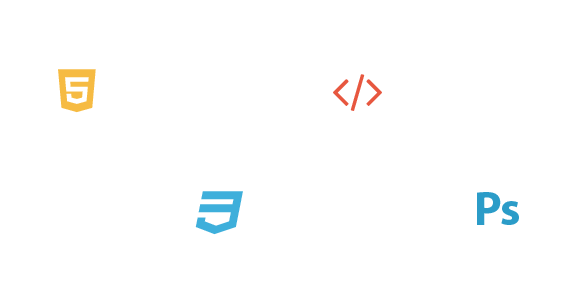
<style>
.page{position:relative;width:575px;height:300px;background:#ffffff}
.page>*{position:absolute;margin:0}
.t1{font:48px "MyriadPro-Bold";letter-spacing:-0.05em;color:#2b9cc8}
</style>
<div class="page">
<p class="t1" style="left:477px;top:192px;width:42px;height:33px">Ps</p>
</div>
